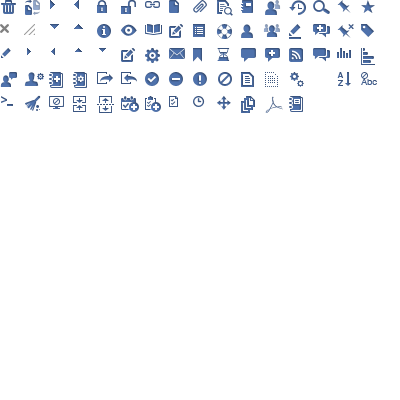
<style>
.page{position:relative;width:400px;height:400px;background:#ffffff}
.page>*{position:absolute;margin:0}
.t1{font:9px "HelveticaNeue";color:#3f5b89}
</style>
<div class="page">
<p class="t1" style="left:361px;top:79px;width:16px;height:6px">Abc</p>
</div>
